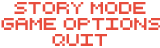
<style>
.page{position:relative;width:160px;height:48px;background:#ffffff}
.page>*{position:absolute;margin:0}
.t1{font:16.7px "RetroComputer";color:#e74c3c}
</style>
<div class="page">
<p class="t1" style="left:14px;top:2px;width:132px;height:12px">Story Mode</p>
<p class="t1" style="left:1px;top:18px;width:160px;height:12px">Game Options</p>
<p class="t1" style="left:52px;top:34px;width:55px;height:12px">Quit</p>
</div>
